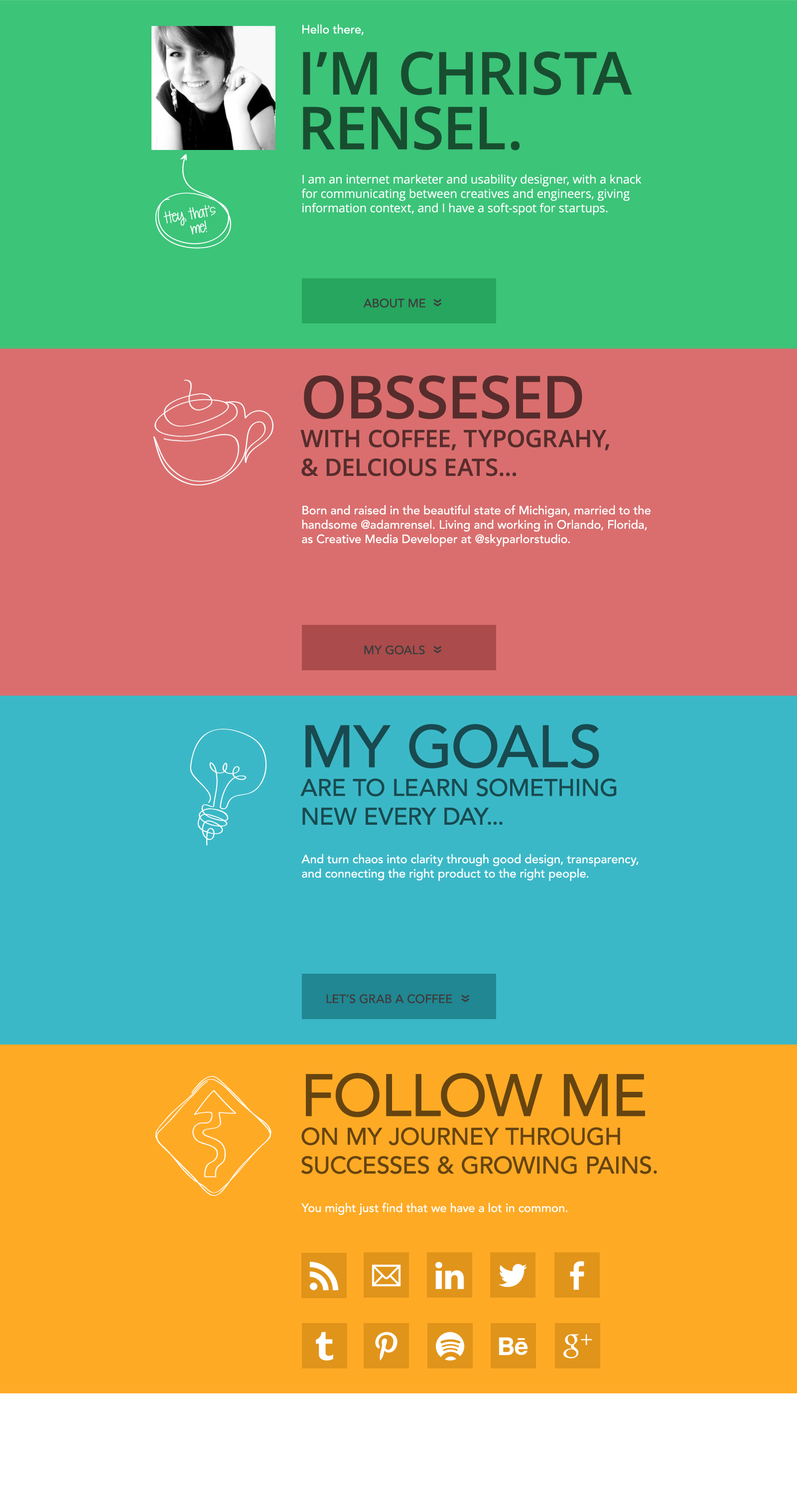
<style>
.page{position:relative;width:797px;height:1495px;background:#3bb8c7}
.page>*{position:absolute;margin:0}
.t1{font:12px "Avenir-Medium";color:#ffffff}
.t2{font:59.3px/59.8px "OpenSans-Semibold";color:#184e30}
.t3{font:12px/9px "Avenir-Medium";color:#184e30}
.t4{font:59.3px/54.8px "OpenSans-Semibold";color:#184e30}
.t5{font:12px "OpenSans";color:#ffffff}
.t6{font:15px/15px "KGSevenSixteen";color:#ffffff}
.t7{font:12px "Avenir-Medium";color:#3d3d3d}
.t8{font:17.9px "Avenir-Medium";color:#3d3d3d}
.t9{font:23.9px "OpenSans-Semibold";color:#572c2c}
.t10{font:59.3px "OpenSans-Semibold";color:#572c2c}
.t11{font:23.9px "Avenir-Medium";color:#184a50}
.t12{font:59.3px "Avenir-Medium";color:#184a50}
.t13{font:23.9px "Avenir-Medium";color:#66440f}
.t14{font:59.3px "Avenir-Medium";color:#66440f}
</style>
<div class="page">
<p class="t1" style="left:303px;top:24px;width:61px;height:11px">Hello there,</p>
<p class="t2" style="left:303px;top:51px;width:329px;height:100px"><span class="t3"><br></span>I’M CHRISTA <br><span class="t4">RENSEL.</span></p>
<p class="t5" style="left:302px;top:174px;width:340px;height:41px">I am an internet marketer and usability designer, with a knack <br>for communicating between creatives and engineers, giving <br>information context, and I have a soft-spot for startups.</p>
<p class="t6" style="left:163px;top:205px;width:53px;height:30px;rotate:-9deg">Hey, that’s <br>        me!</p>
<p class="t7" style="left:363px;top:299px;width:63px;height:9px">ABOUT ME</p>
<p class="t8" style="left:434px;top:299px;width:8px;height:8px;rotate:-90deg">«</p>
<p class="t9" style="left:301px;top:375px;width:309px;height:101px"><span class="t10">OBSSESED <br></span>WITH COFFEE, TYPOGRAHY, <br>&amp; DELCIOUS EATS...</p>
<p class="t1" style="left:302px;top:505px;width:349px;height:42px">Born and raised in the beautiful state of Michigan, married to the handsome @adamrensel. Living and working in Orlando, Florida, as Creative Media Developer at @skyparlorstudio.</p>
<p class="t7" style="left:364px;top:645px;width:61px;height:10px">MY GOALS</p>
<p class="t8" style="left:434px;top:646px;width:8px;height:7px;rotate:-90deg">«</p>
<p class="t11" style="left:301px;top:724px;width:316px;height:101px"><span class="t12">MY GOALS <br></span>ARE TO LEARN SOMETHING <br>NEW EVERY DAY...</p>
<p class="t1" style="left:302px;top:854px;width:337px;height:27px">And turn chaos into clarity through good design, transparency, and connecting the right product to the right people.</p>
<p class="t7" style="left:326px;top:994px;width:127px;height:10px">LET’S GRAB A COFFEE</p>
<p class="t8" style="left:462px;top:995px;width:8px;height:7px;rotate:-90deg">«</p>
<p class="t13" style="left:301px;top:1073px;width:356px;height:101px"><span class="t14">FOLLOW ME <br></span>ON MY JOURNEY THROUGH <br>SUCCESSES &amp; GROWING PAINS.</p>
<p class="t1" style="left:302px;top:1203px;width:266px;height:12px">You might just find that we have a lot in common.</p>
</div>
